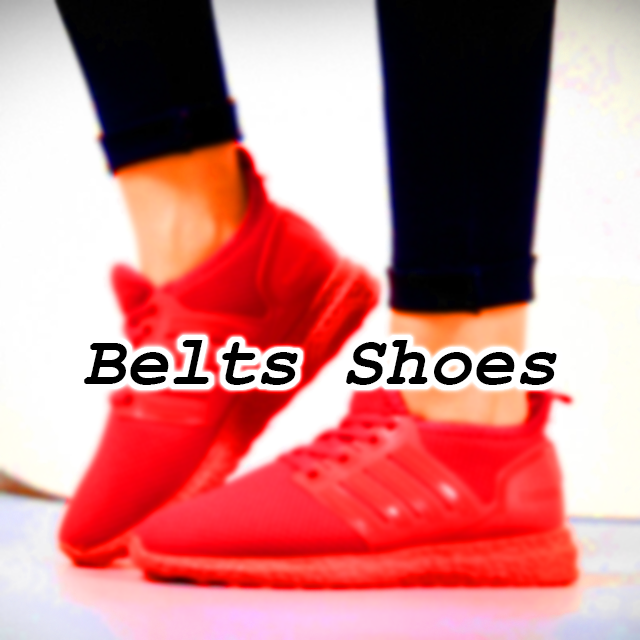
<style>
.page{position:relative;width:640px;height:640px}
.page>*{position:absolute;margin:0}
.t1{font:72px "CourierNewPS-BoldItalicMT";color:#000000}
</style>
<div class="page">
<p class="t1" style="left:84px;top:340px;width:473px;height:45px">Belts Shoes</p>
</div>
